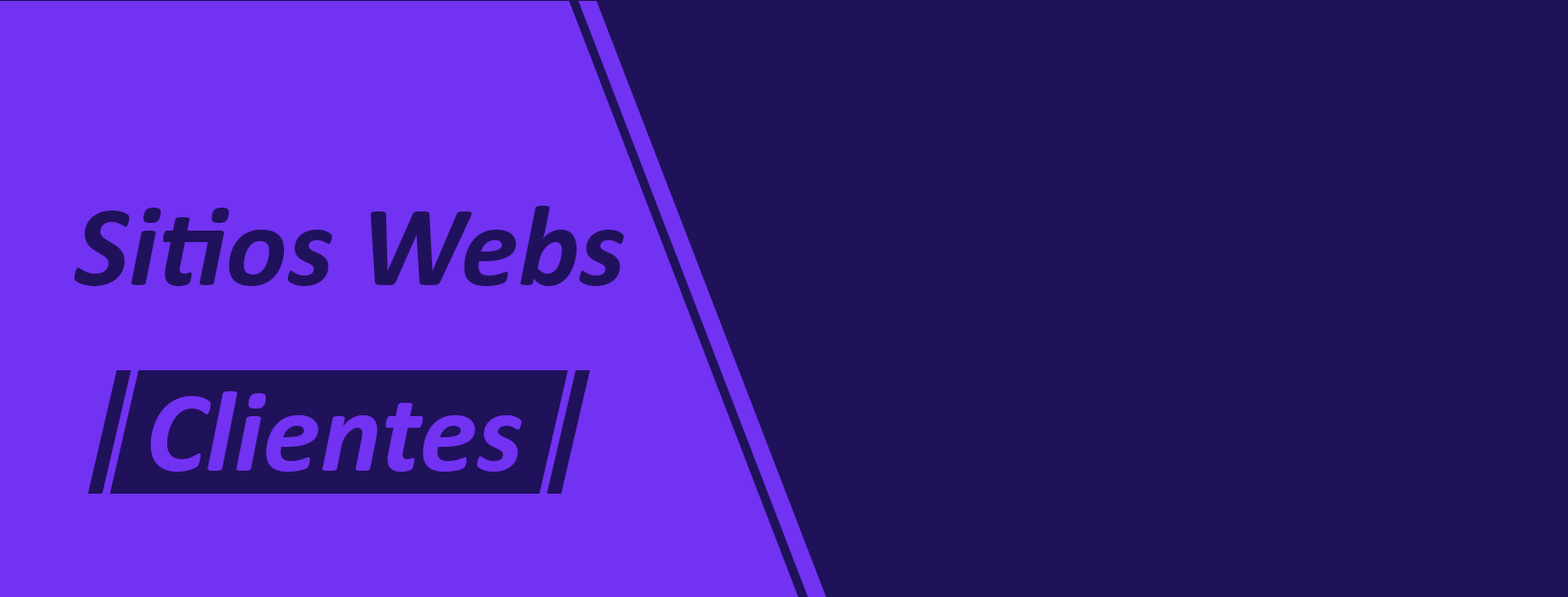
<style>
.page{position:relative;width:1568px;height:597px;background:#20115b}
.page>*{position:absolute;margin:0}
.t1{font:116.6px "Calibri-BoldItalic";color:#20115b}
.t2{font:116.6px "Calibri-BoldItalic";color:#7232f2}
</style>
<div class="page">
<p class="t1" style="left:74px;top:206px;width:550px;height:80px">Sitios Webs</p>
<p class="t2" style="left:150px;top:391px;width:372px;height:80px">Clientes</p>
</div>
